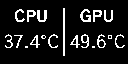
<style>
.page{position:relative;width:128px;height:64px;background:#000000}
.page>*{position:absolute;margin:0}
.t1{font:16px "GothicA1-Bold";color:#ffffff}
.t2{font:18px "GothicA1-Regular";color:#ffffff}
</style>
<div class="page">
<p class="t1" style="left:14px;top:9px;width:33px;height:14px">CPU</p>
<p class="t1" style="left:80px;top:9px;width:33px;height:14px">GPU</p>
<p class="t2" style="left:4px;top:34px;width:55px;height:15px">37.4°C</p>
<p class="t2" style="left:70px;top:34px;width:56px;height:15px">49.6°C</p>
</div>
